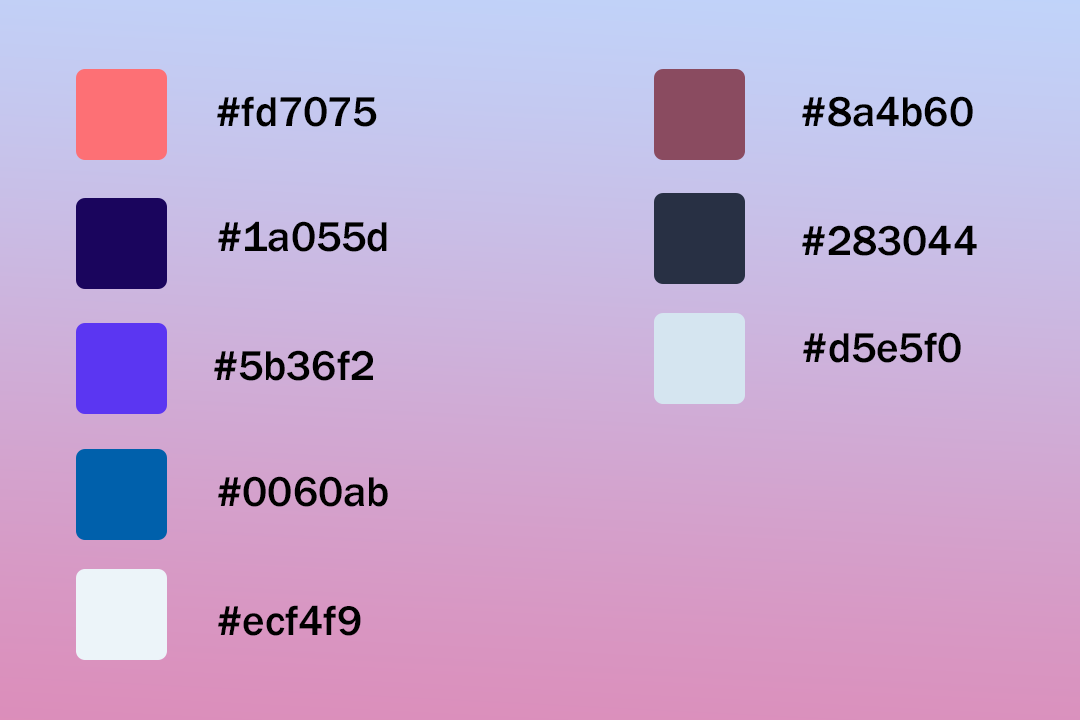
<style>
.page{position:relative;width:1080px;height:720px}
.page>*{position:absolute;margin:0}
.t1{font:42.9px "FranklinGothic-Medium";color:#000000}
</style>
<div class="page">
<p class="t1" style="left:217px;top:96px;width:160px;height:31px">#fd7075</p>
<p class="t1" style="left:802px;top:96px;width:171px;height:31px">#8a4b60</p>
<p class="t1" style="left:218px;top:221px;width:169px;height:31px">#1a055d</p>
<p class="t1" style="left:802px;top:225px;width:175px;height:31px">#283044</p>
<p class="t1" style="left:803px;top:332px;width:158px;height:31px">#d5e5f0</p>
<p class="t1" style="left:214px;top:350px;width:159px;height:31px">#5b36f2</p>
<p class="t1" style="left:218px;top:476px;width:170px;height:31px">#0060ab</p>
<p class="t1" style="left:218px;top:605px;width:143px;height:31px">#ecf4f9</p>
</div>
